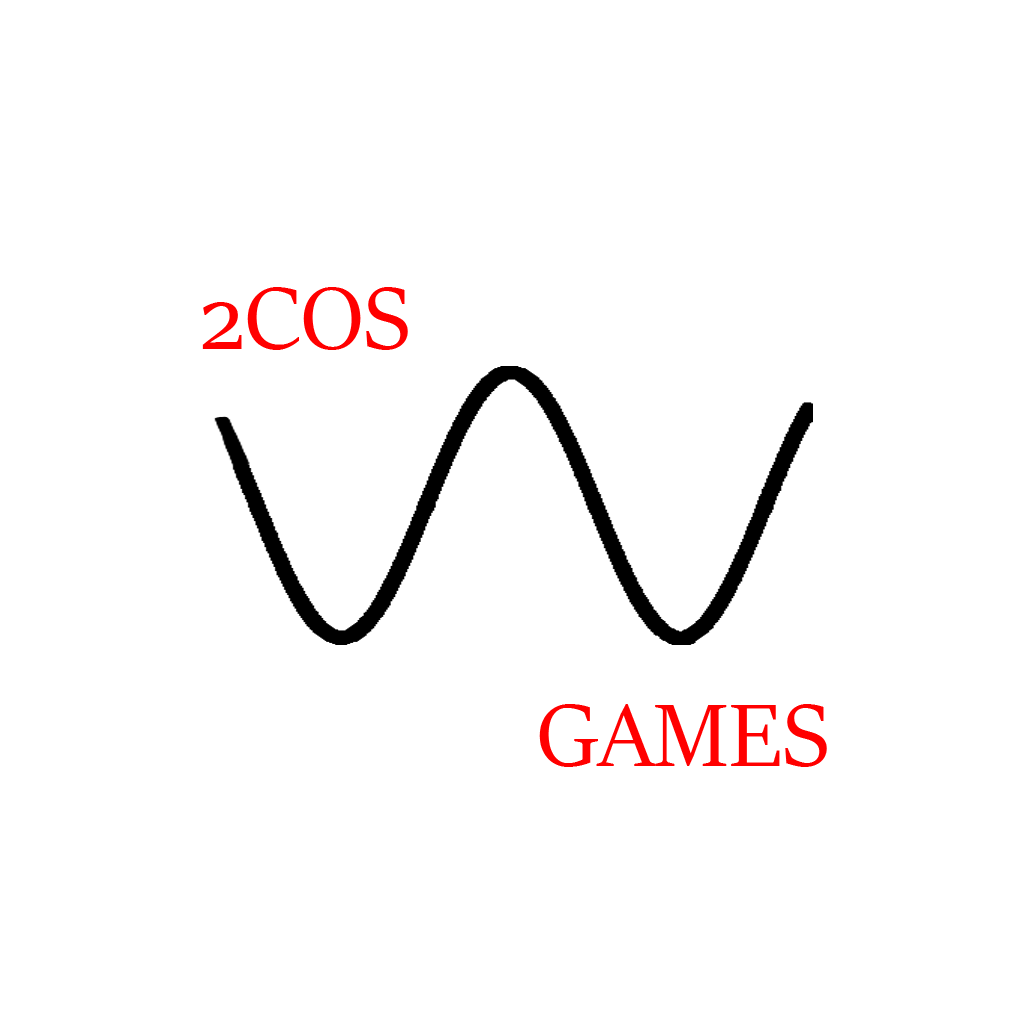
<style>
.page{position:relative;width:1024px;height:1024px;background:#ffffff}
.page>*{position:absolute;margin:0}
.t1{font:100px "SitkaBanner";color:#ff0000}
</style>
<div class="page">
<p class="t1" style="left:202px;top:287px;width:206px;height:63px">2COS</p>
<p class="t1" style="left:539px;top:704px;width:288px;height:63px">GAMES</p>
</div>
